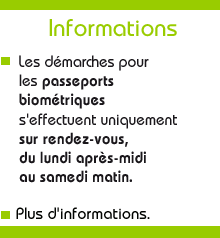
<style>
.page{position:relative;width:220px;height:238px;background:#ffffff}
.page>*{position:absolute;margin:0}
.t1{font:24px "DynameSSK";color:#99cc00}
.t2{font:16px "DynameSSK-SemiBold";color:#1a171b;scale:0.95 1}
.t3{font:16px "DynameSSK";color:#1a171b;scale:0.95 1}
.t4{font:16px "DynameSSK";color:#010300}
</style>
<div class="page">
<p class="t1" style="left:49px;top:19px;width:128px;height:18px">Informations</p>
<p class="t2" style="left:19px;top:55px;width:158px;height:128px"><span class="t3">Les démarches pour<br>les </span>passeports<br>biométriques<span class="t3"><br>s'effectuent uniquement<br></span>sur rendez-vous,<br>du lundi après-midi<br>au samedi matin.</p>
<p class="t4" style="left:16px;top:207px;width:134px;height:12px">Plus d'informations.</p>
</div>
